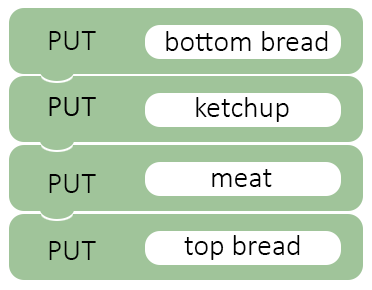
<style>
.page{position:relative;width:372px;height:290px;background:#a0c49a}
.page>*{position:absolute;margin:0}
.t1{font:30px "Calibri-Light";color:#000000}
</style>
<div class="page">
<p class="t1" style="left:49px;top:31px;width:47px;height:19px">PUT</p>
<p class="t1" style="left:166px;top:31px;width:162px;height:20px">bottom bread</p>
<p class="t1" style="left:196px;top:97px;width:93px;height:25px">ketchup</p>
<p class="t1" style="left:49px;top:174px;width:47px;height:19px">PUT</p>
<p class="t1" style="left:212px;top:169px;width:60px;height:18px">meat</p>
<p class="t1" style="left:49px;top:241px;width:47px;height:19px">PUT</p>
<p class="t1" style="left:184px;top:235px;width:116px;height:25px">top bread</p>
</div>
